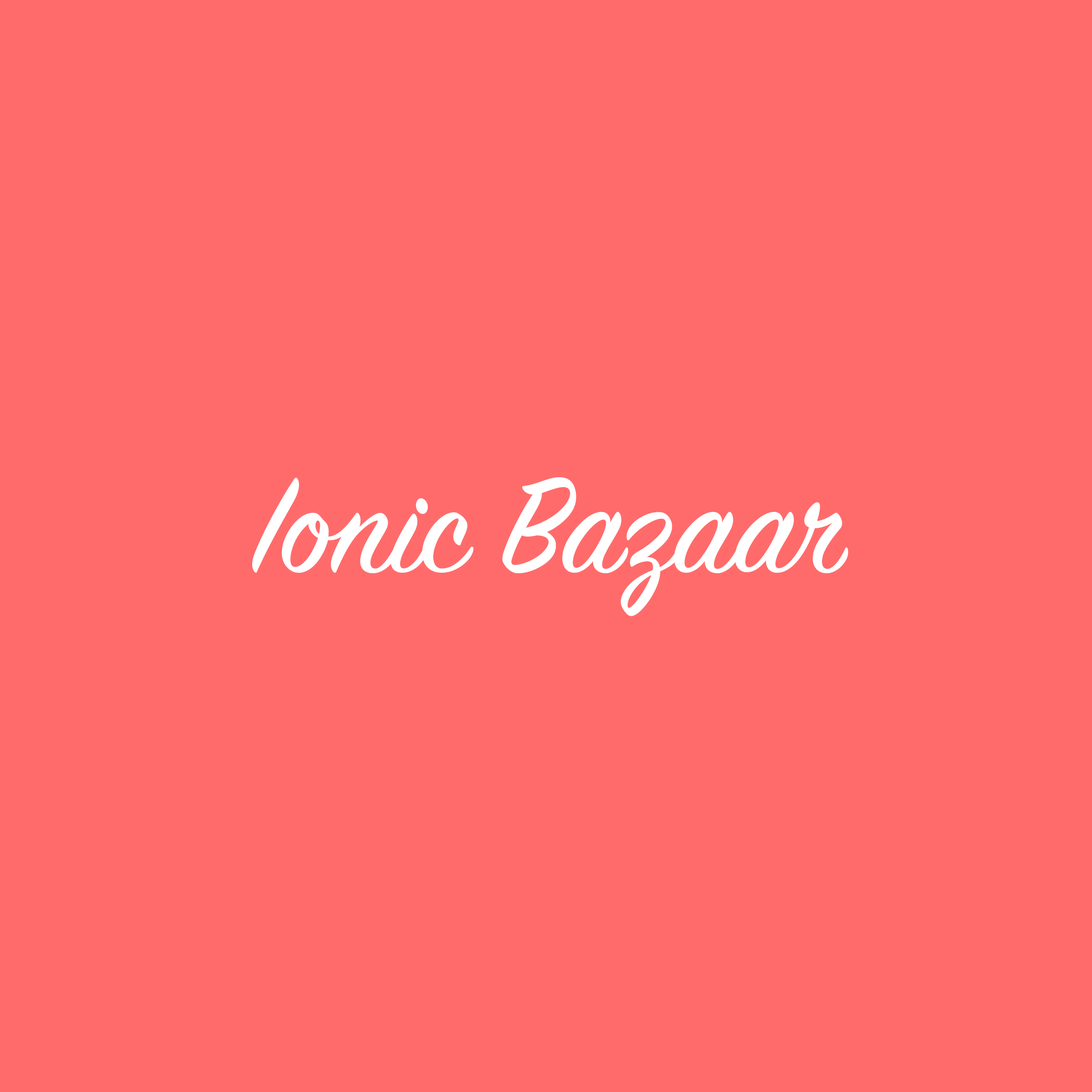
<style>
.page{position:relative;width:1092px;height:1092px;background:#ff6b6b}
.page>*{position:absolute;margin:0}
.t1{font:148.4px "SignPainter-HouseScript";color:#ffffff}
</style>
<div class="page">
<p class="t1" style="left:252px;top:477px;width:596px;height:139px">Ionic Bazaar</p>
</div>
